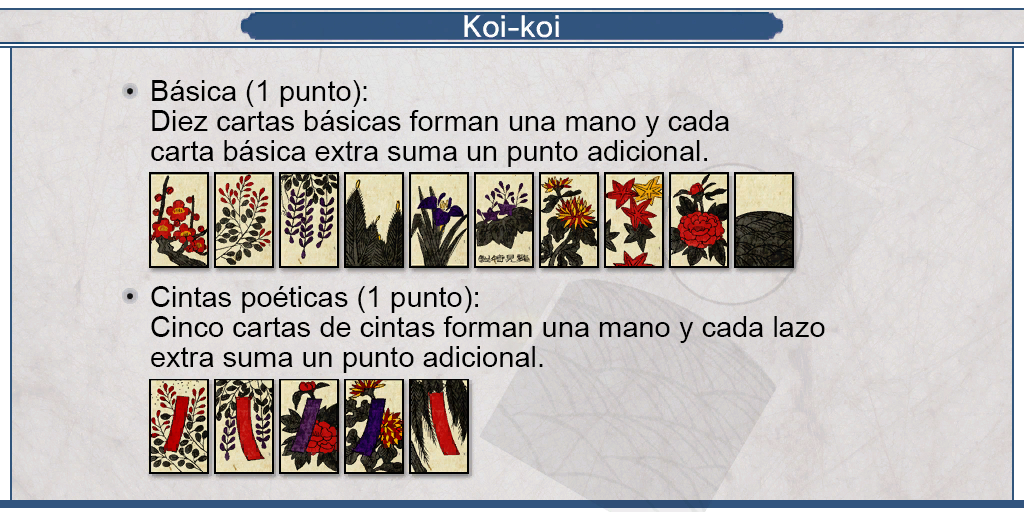
<style>
.page{position:relative;width:1024px;height:512px}
.page>*{position:absolute;margin:0}
.t1{font:29px/30px "ArialMT";color:#000000}
</style>
<div class="page">
<p class="t1" style="left:151px;top:80px;width:578px;height:87px;text-align:justify">Básica (1 punto):<br>Diez cartas básicas forman una mano y cada<br>carta básica extra suma un punto adicional.</p>
<p class="t1" style="left:151px;top:286px;width:674px;height:87px;text-align:justify">Cintas poéticas (1 punto):<br>Cinco cartas de cintas forman una mano y cada lazo <br>extra suma un punto adicional.</p>
</div>
